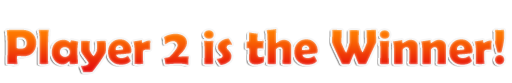
<style>
.page{position:relative;width:512px;height:83px;background:#ffffff}
.page>*{position:absolute;margin:0}
.t1{font:50px "BerlinSansFBDemi-Bold"}
</style>
<div class="page">
<p class="t1" style="left:6px;top:29px;width:499px;height:44px">Player 2 is the Winner!</p>
</div>
